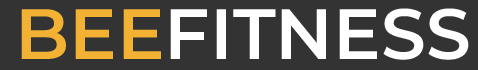
<style>
.page{position:relative;width:478px;height:70px;background:#333333}
.page>*{position:absolute;margin:0}
.t1{font:71.2px "Montserrat-SemiBold";color:#ffffff}
.t2{font:71.2px "Montserrat-SemiBold";color:#f3b233}
</style>
<div class="page">
<p class="t1" style="left:21px;top:8px;width:448px;height:52px"><span class="t2">BEE</span>FITNESS</p>
</div>
